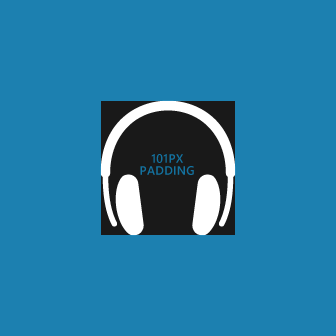
<style>
.page{position:relative;width:336px;height:336px;background:#1c80b0}
.page>*{position:absolute;margin:0}
.t1{font:12px/12px "SegoeWP-Semibold";letter-spacing:0.025em;color:#1372a0;text-transform:uppercase}
</style>
<div class="page">
<p class="t1" style="left:140px;top:154px;width:54px;height:21px;text-align:center">101px<br>padding</p>
</div>
